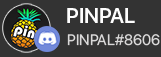
<style>
.page{position:relative;width:161px;height:57px;background:#333333}
.page>*{position:absolute;margin:0}
.t1{font:21.1px "SFProDisplay-Semibold";color:#fefefe}
.t2{font:15px "SFProDisplay-Regular";color:#dad9d9}
</style>
<div class="page">
<p class="t1" style="left:67px;top:8px;width:68px;height:15px">PINPAL</p>
<p class="t2" style="left:67px;top:34px;width:93px;height:12px">PINPAL#8606</p>
</div>
